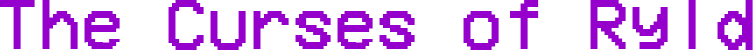
<style>
.page{position:relative;width:755px;height:53px;background:#ffffff}
.page>*{position:absolute;margin:0}
.t1{font:72px "VCROSDMono";color:#9500cc}
</style>
<div class="page">
<p class="t1" style="left:0px;top:0px;width:753px;height:50px">The Curses of Ryld</p>
</div>
